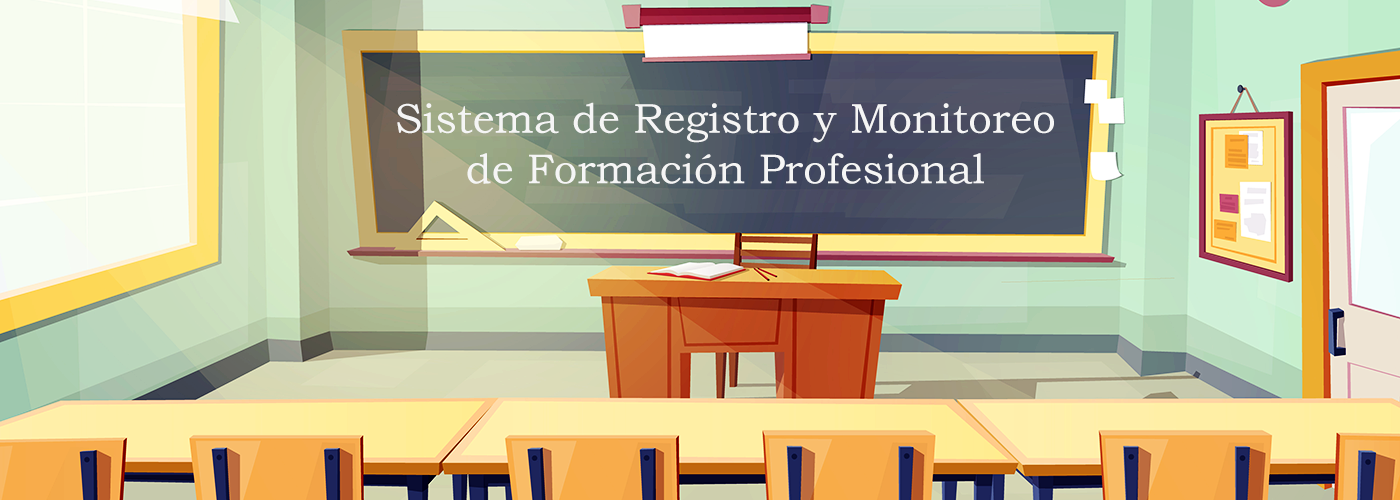
<style>
.page{position:relative;width:1400px;height:500px}
.page>*{position:absolute;margin:0}
.t1{font:42px "BookmanOldStyle";color:#f5f5f5}
</style>
<div class="page">
<p class="t1" style="left:397px;top:102px;width:657px;height:82px;text-align:center">Sistema de Registro y Monitoreo<br>de Formación Profesional</p>
</div>
